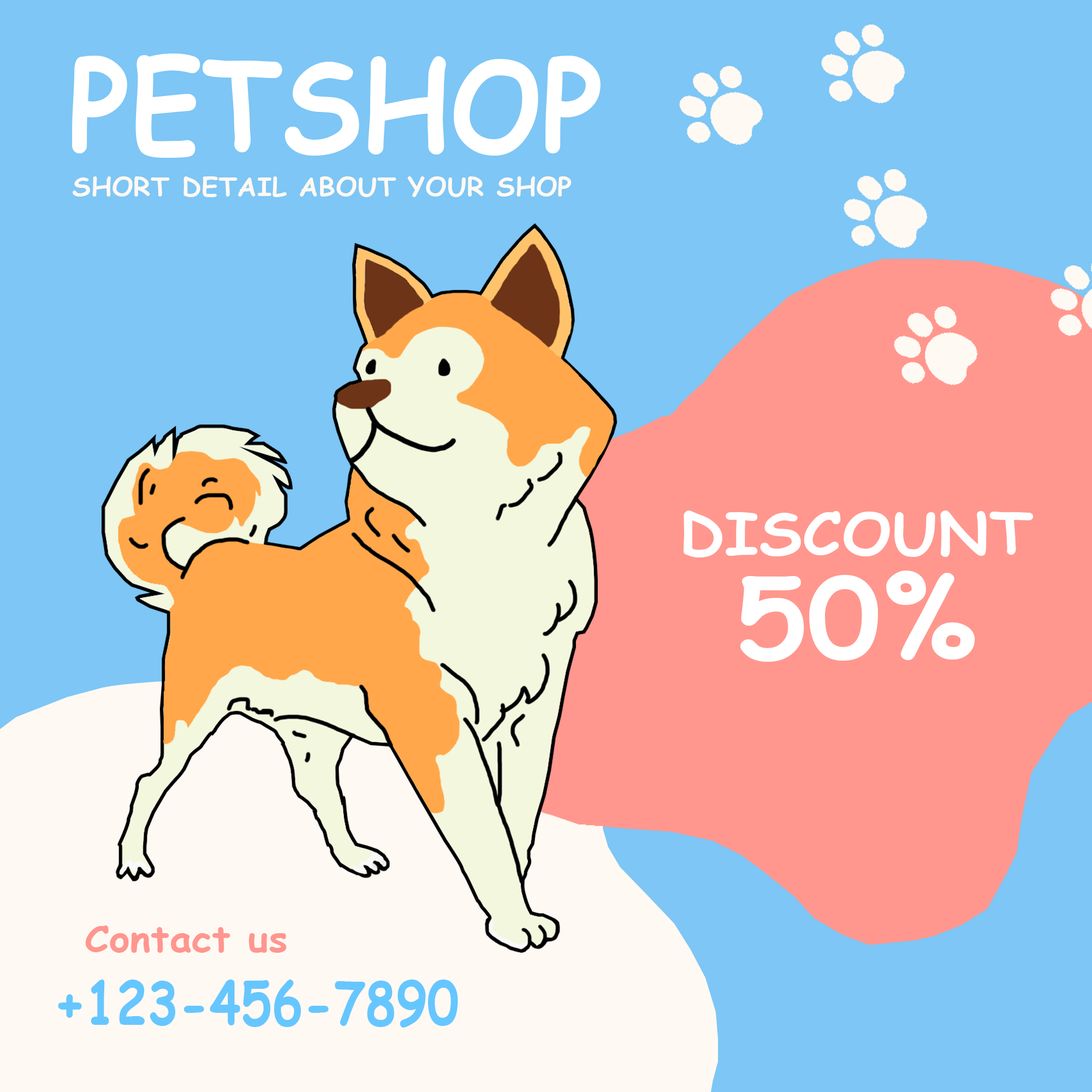
<style>
.page{position:relative;width:1092px;height:1092px;background:#7dc6f5}
.page>*{position:absolute;margin:0}
.t1{font:125.6px "ComicSansMS-Bold";letter-spacing:0.005em;color:#ffffff;scale:0.91 1}
.t2{font:25.7px "ComicSansMS-Bold";letter-spacing:0.005em;color:#fff9f3;scale:1.05 1}
.t3{font:58.4px/103.7px "ComicSansMS-Bold";letter-spacing:0.005em;color:#ffffff;scale:1.07 1}
.t4{font:109.9px/103.7px "ComicSansMS-Bold";letter-spacing:0.005em;color:#ffffff;scale:1.07 1}
.t5{font:35.4px "ComicSansMS-Bold";letter-spacing:0.005em;color:#ff9690;scale:1.11 1}
.t6{font:59.6px "ComicSansMS-Bold";letter-spacing:0.005em;color:#66c6ff;scale:0.85 1}
</style>
<div class="page">
<p class="t1" style="left:72px;top:54px;width:529px;height:104px">PETSHOP</p>
<p class="t2" style="left:73px;top:176px;width:498px;height:21px">SHORT DETAIL ABOUT YOUR SHOP</p>
<p class="t3" style="left:683px;top:511px;width:351px;height:151px;text-align:center">DISCOUNT<br><span class="t4">50%</span></p>
<p class="t5" style="left:85px;top:925px;width:202px;height:28px">Contact us</p>
<p class="t6" style="left:58px;top:980px;width:400px;height:48px">+123-456-7890</p>
</div>
